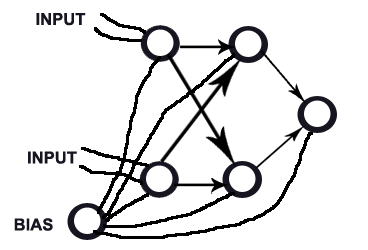
<style>
.page{position:relative;width:368px;height:250px;background:#ffffff}
.page>*{position:absolute;margin:0}
.t1{font:16.7px "Arial-BoldMT";color:#171520}
</style>
<div class="page">
<p class="t1" style="left:36px;top:13px;width:50px;height:13px">INPUT</p>
<p class="t1" style="left:28px;top:151px;width:49px;height:13px">INPUT</p>
<p class="t1" style="left:14px;top:218px;width:39px;height:13px">BIAS</p>
</div>
